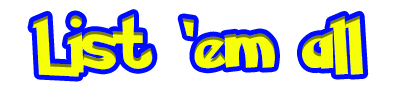
<style>
.page{position:relative;width:400px;height:100px;background:#ffffff}
.page>*{position:absolute;margin:0}
.t1{font:55.6px "PokemonSolidNormal";letter-spacing:0.03em;color:#f6ff08}
</style>
<div class="page">
<p class="t1" style="left:32px;top:14px;width:332px;height:63px">List ‘em all</p>
</div>
